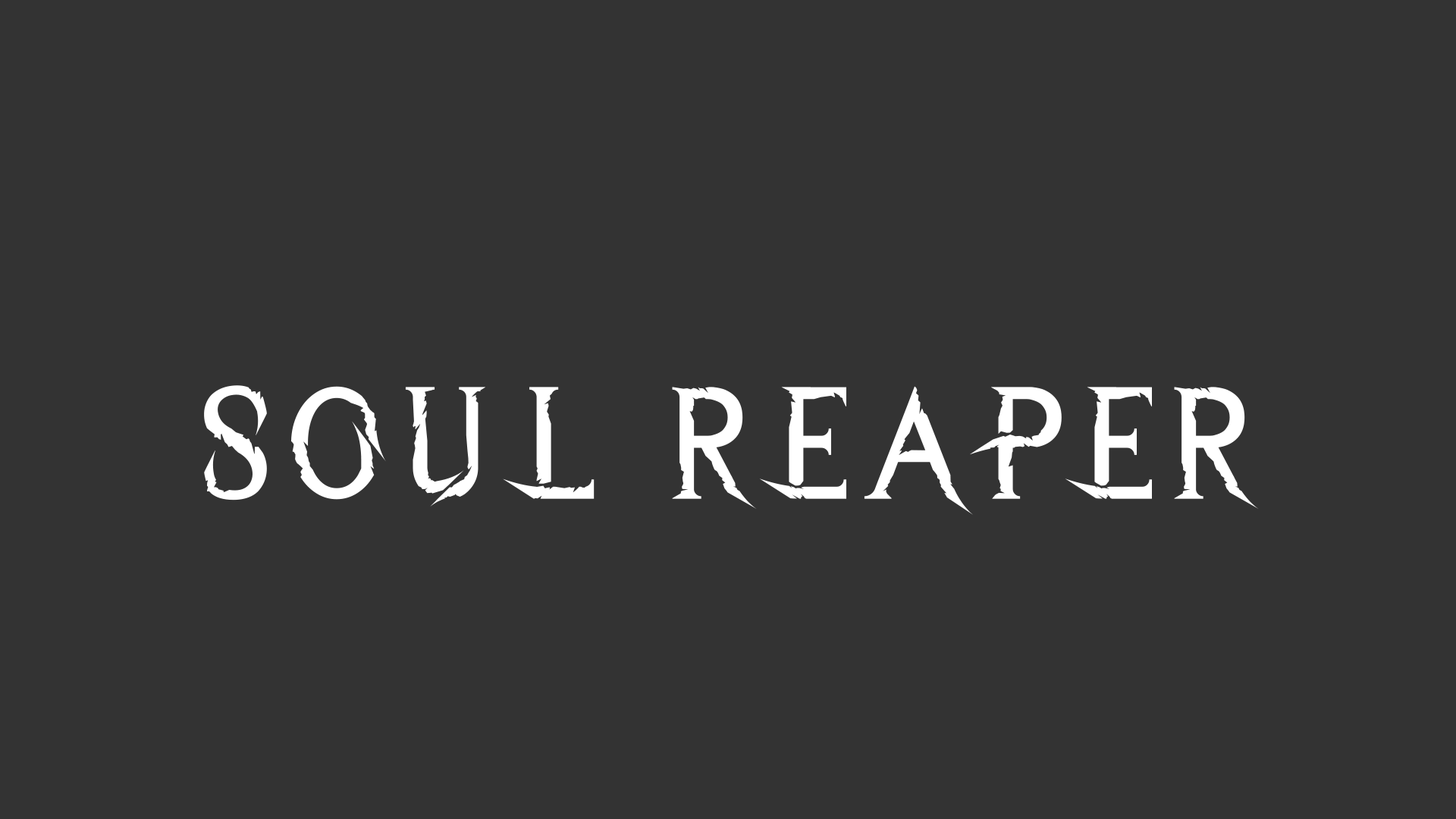
<style>
.page{position:relative;width:1456px;height:819px;background:#333333}
.page>*{position:absolute;margin:0}
.t1{font:157.4px "WreckedShipRegular";letter-spacing:0.05em;color:#ffffff}
</style>
<div class="page">
<p class="t1" style="left:204px;top:385px;width:1055px;height:130px">SOUL REAPER</p>
</div>
